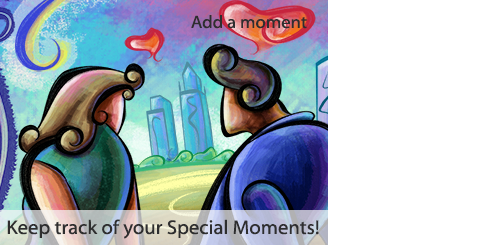
<style>
.page{position:relative;width:485px;height:245px;background:#ffffff}
.page>*{position:absolute;margin:0}
.t1{font:18px "MyriadWebPro";color:#2e2e2f}
.t2{font:20px "MyriadWebPro";color:#2e2e2f}
</style>
<div class="page">
<p class="t1" style="left:191px;top:15px;width:116px;height:14px">Add a moment</p>
<p class="t2" style="left:7px;top:219px;width:312px;height:20px">Keep track of your Special Moments!</p>
</div>
